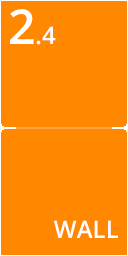
<style>
.page{position:relative;width:128px;height:256px;background:#ff8800}
.page>*{position:absolute;margin:0}
.t1{font:24px "OpenSans-Semibold";color:#ffffff}
.t2{font:48px "OpenSans-Semibold";color:#ffffff}
</style>
<div class="page">
<p class="t1" style="left:10px;top:9px;width:46px;height:36px"><span class="t2">2</span>.4</p>
<p class="t1" style="left:54px;top:220px;width:64px;height:18px">WALL</p>
</div>
